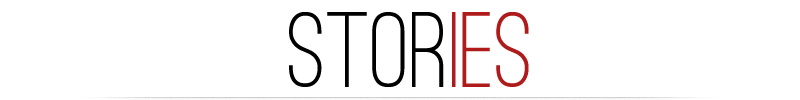
<style>
.page{position:relative;width:800px;height:100px;background:#ffffff}
.page>*{position:absolute;margin:0}
.t1{font:111.1px "OstrichSans-Medium";color:#000000}
.t2{font:111.1px "OstrichSans-Medium";color:#af1b1b}
</style>
<div class="page">
<p class="t1" style="left:289px;top:12px;width:240px;height:75px">stor<span class="t2">ies</span></p>
</div>
